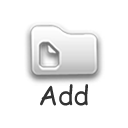
<style>
.page{position:relative;width:128px;height:128px;background:#ffffff}
.page>*{position:absolute;margin:0}
.t1{font:26.8px "ComicSansMS";color:#323232}
</style>
<div class="page">
<p class="t1" style="left:40px;top:84px;width:48px;height:22px">Add</p>
</div>
